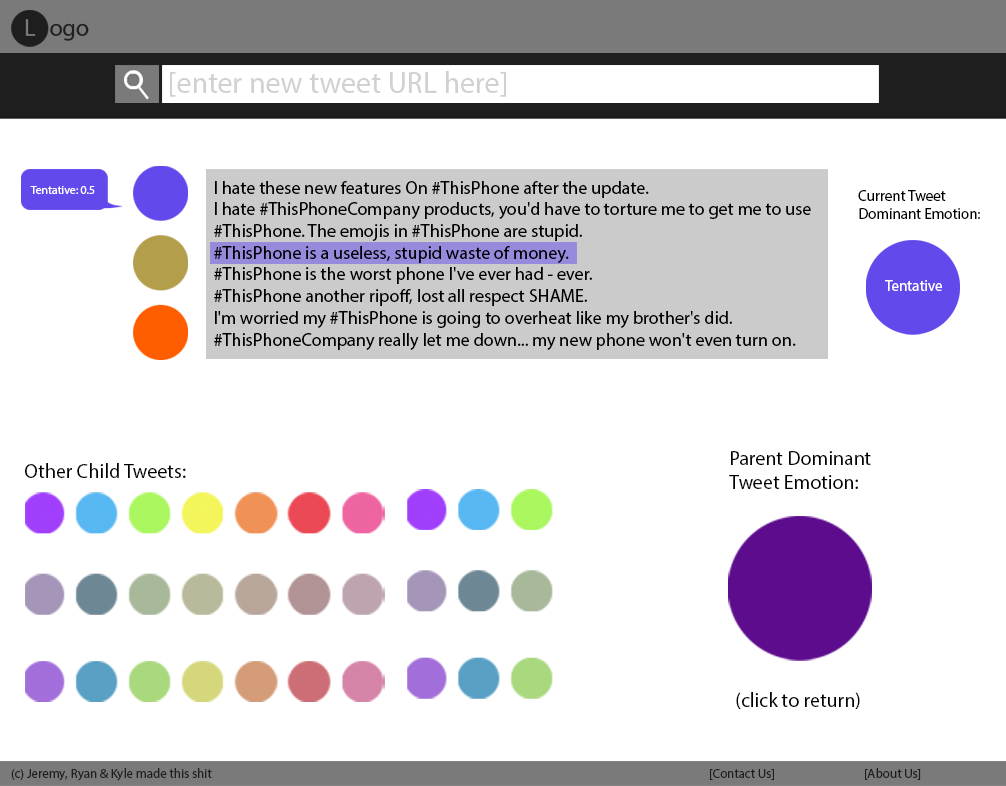
<style>
.page{position:relative;width:1006px;height:786px;background:#ffffff}
.page>*{position:absolute;margin:0}
.t1{font:30px "MyriadPro-Regular";color:#d1d1d1}
.t2{font:18.1px "MyriadPro-Regular";color:#000000}
.t3{font:11.8px "MyriadPro-Regular";color:#ffffff}
.t4{font:15px "MyriadPro-Regular";color:#000000}
.t5{font:15px "MyriadPro-Regular";color:#ffffff}
.t6{font:20px "MyriadPro-Regular";color:#000000}
.t7{font:13px "MyriadPro-Regular";color:#1e1e1e}
</style>
<div class="page">
<p class="t1" style="left:170px;top:71px;width:336px;height:26px">[enter new tweet URL here]</p>
<p class="t2" style="left:214px;top:181px;width:597px;height:169px">I hate these new features On #ThisPhone after the update.<br>I hate #ThisPhoneCompany products, you'd have to torture me to get me to use<br>#ThisPhone. The emojis in #ThisPhone are stupid.<br>#ThisPhone is a useless, stupid waste of money.<br>#ThisPhone is the worst phone I've ever had - ever.<br>#ThisPhone another ripoff, lost all respect SHAME.<br>I'm worried my #ThisPhone is going to overheat like my brother's did.<br>#ThisPhoneCompany really let me down... my new phone won't even turn on.</p>
<p class="t3" style="left:30px;top:186px;width:65px;height:8px">Tentative: 0.5</p>
<p class="t4" style="left:858px;top:190px;width:122px;height:29px">Current Tweet<br>Dominant Emotion:</p>
<p class="t5" style="left:885px;top:280px;width:57px;height:11px">Tentative</p>
<p class="t6" style="left:729px;top:451px;width:142px;height:38px">Parent Dominant<br>Tweet Emotion:</p>
<p class="t6" style="left:25px;top:463px;width:161px;height:15px">Other Child Tweets:</p>
<p class="t6" style="left:736px;top:692px;width:124px;height:17px">(click to return)</p>
<p class="t7" style="left:11px;top:768px;width:201px;height:13px">(c) Jeremy, Ryan &amp; Kyle made this shit</p>
<p class="t7" style="left:710px;top:769px;width:64px;height:11px">[Contact Us]</p>
<p class="t7" style="left:865px;top:768px;width:56px;height:12px">[About Us]</p>
</div>
